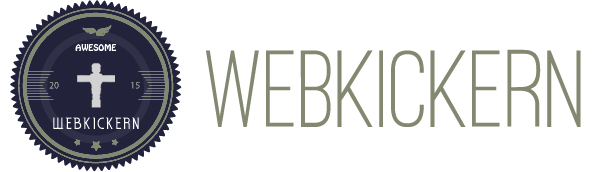
<style>
.page{position:relative;width:600px;height:172px;background:#ffffff}
.page>*{position:absolute;margin:0}
.t1{font:8.1px "HoboStd";color:#ffffff}
.t2{font:113.4px "OstrichSans-Medium";color:#828970}
.t3{font:16px "EdenMills";letter-spacing:0.1em;color:#ffffff}
</style>
<div class="page">
<p class="t1" style="left:75px;top:44px;width:42px;height:8px">AWESOME</p>
<p class="t2" style="left:206px;top:49px;width:375px;height:78px">Webkickern</p>
<p class="t3" style="left:53px;top:117px;width:86px;height:12px">WEBKICKERN</p>
</div>
